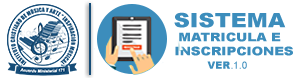
<style>
.page{position:relative;width:300px;height:78px;background:#ffffff}
.page>*{position:absolute;margin:0}
.t1{font:12px/14px "Arial-Black";color:#3c8dbc;text-transform:uppercase;scale:1.11 1}
.t2{font:20.1px/14px "Arial-Black";color:#3c8dbc;scale:1.11 1}
.t3{font:10px "ArialMT";letter-spacing:0.005em;color:#3c8dbc;text-transform:uppercase}
.t4{font:10px "Arial-Black";letter-spacing:0.005em;color:#3c8dbc;text-transform:uppercase}
</style>
<div class="page">
<p class="t1" style="left:174px;top:12px;width:119px;height:44px;text-align:center"><span class="t2">SISTEMA<br></span>MATRICULA e<br>  INSCRIPCIONES</p>
<p class="t3" style="left:207px;top:61px;width:40px;height:8px"><span class="t4">ver</span>.1.0</p>
</div>
